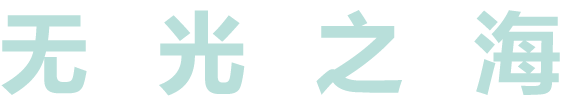
<style>
.page{position:relative;width:561px;height:110px;background:#ffffff}
.page>*{position:absolute;margin:0}
.t1{font:88px "MicrosoftYaHei-Bold";color:#b8dfda}
</style>
<div class="page">
<p class="t1" style="left:1px;top:10px;width:559px;height:86px">无光之海</p>
</div>
